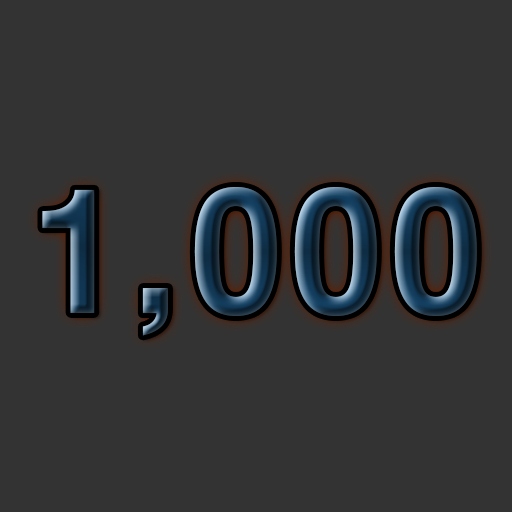
<style>
.page{position:relative;width:512px;height:512px;background:#333333}
.page>*{position:absolute;margin:0}
.t1{font:160.6px "H2gtrE"}
</style>
<div class="page">
<p class="t1" style="left:42px;top:187px;width:435px;height:149px">1,000</p>
</div>
